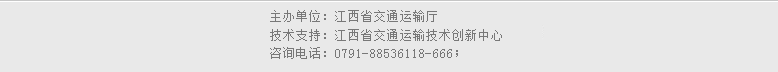
<style>
.page{position:relative;width:778px;height:72px;background:#e9e9e9}
.page>*{position:absolute;margin:0}
.t1{font:13.3px/18.7px "SimSun";color:#787878}
</style>
<div class="page">
<p class="t1" style="left:270px;top:10px;width:232px;height:49px">主办单位：江西省交通运输厅 <br>技术支持：江西省交通运输技术创新中心 <br>咨询电话：0791-88536118-666；</p>
</div>
